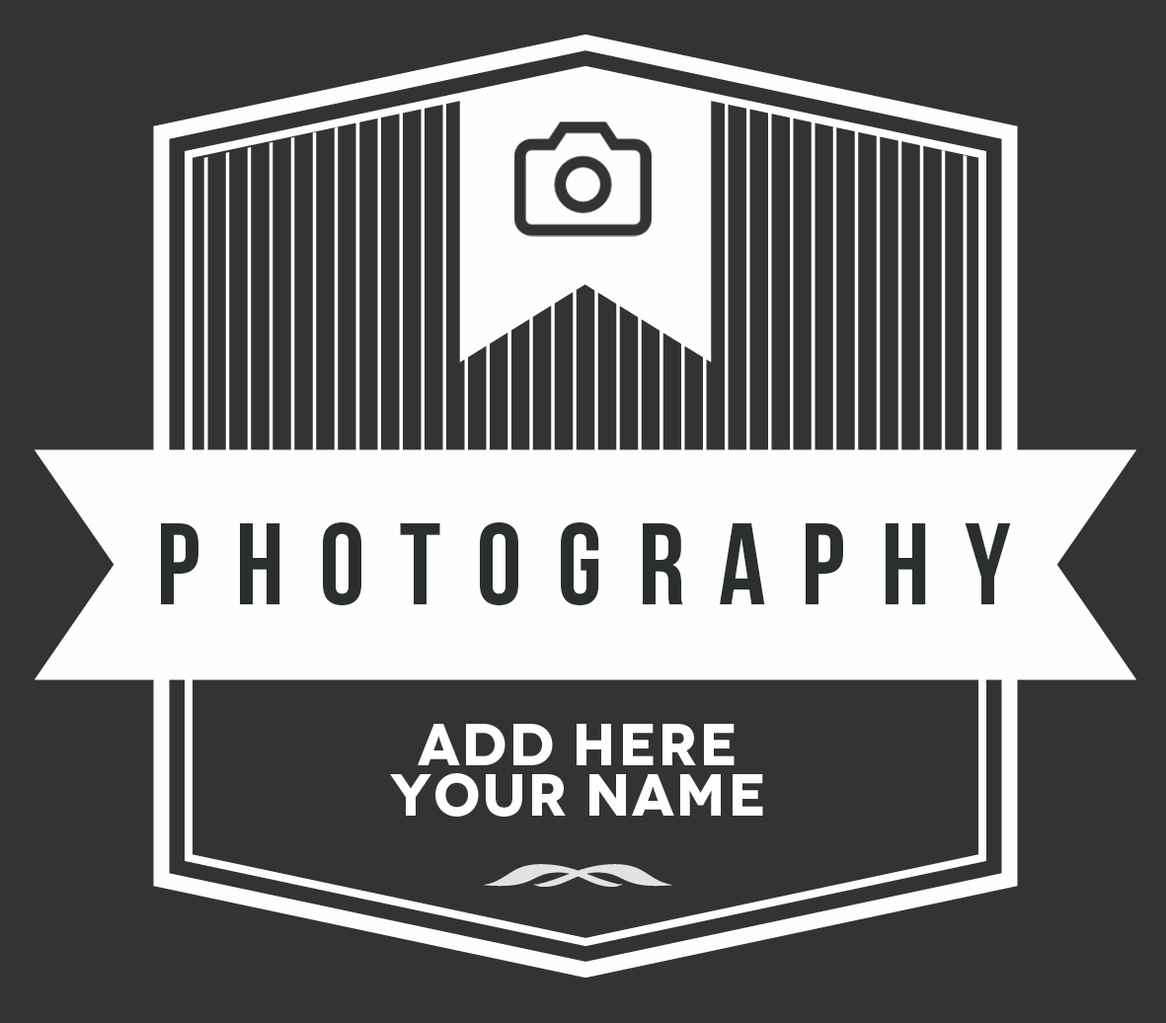
<style>
.page{position:relative;width:1166px;height:1023px;background:#333333}
.page>*{position:absolute;margin:0}
.t1{font:116.2px "BebasNeueBold";letter-spacing:0.3em;color:#2a2f2b}
.t2{font:58.6px/50.4px "Novecentowide-Bold";letter-spacing:0.025em;color:#ffffff}
</style>
<div class="page">
<p class="t1" style="left:161px;top:522px;width:850px;height:83px">PHOTOGRAPHY</p>
<p class="t2" style="left:390px;top:724px;width:373px;height:92px;text-align:center">ADD HERE<br>YOUR NAME</p>
</div>
